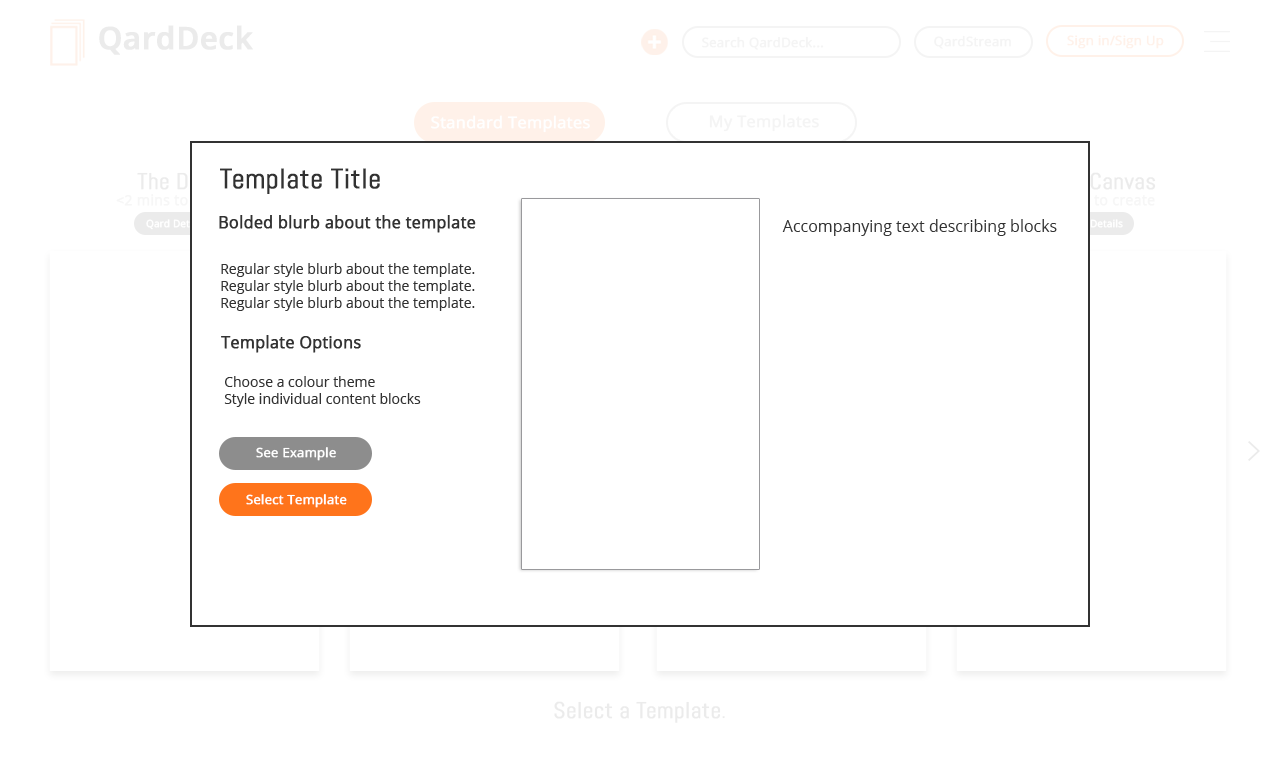
<style>
.page{position:relative;width:1280px;height:768px;background:#ffffff}
.page>*{position:absolute;margin:0}
.t1{font:28px "Abel-Regular";color:#323232;font-weight:bold}
.t2{font:16px "OpenSans";color:#323232;font-weight:bold}
.t3{font:16px "OpenSans";color:#323232}
.t4{font:14px "OpenSans";color:#323232}
.t5{font:12.8px "OpenSans";color:#ffffff;font-weight:bold}
</style>
<div class="page">
<p class="t1" style="left:220px;top:168px;width:160px;height:26px">Template Title</p>
<p class="t2" style="left:219px;top:215px;width:257px;height:18px">Bolded blurb about the template</p>
<p class="t3" style="left:782px;top:219px;width:275px;height:17px">Accompanying text describing blocks</p>
<p class="t4" style="left:221px;top:263px;width:254px;height:48px">Regular style blurb about the template. <br>Regular style blurb about the template. <br>Regular style blurb about the template.</p>
<p class="t2" style="left:221px;top:335px;width:140px;height:18px">Template Options</p>
<p class="t4" style="left:224px;top:376px;width:197px;height:31px">Choose a colour theme<br>Style individual content blocks</p>
<p class="t5" style="left:256px;top:447px;width:80px;height:14px">See Example</p>
<p class="t5" style="left:246px;top:494px;width:101px;height:14px">Select Template</p>
</div>
